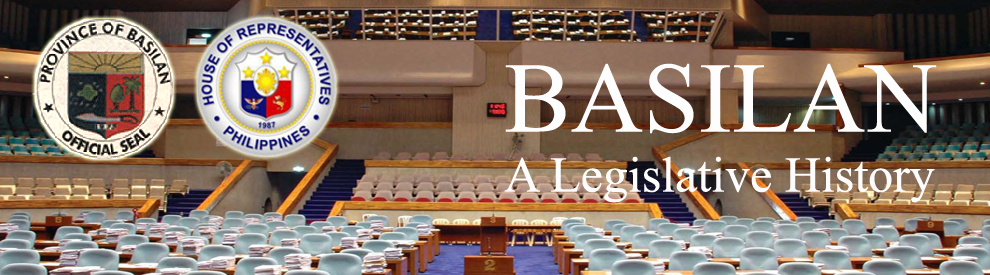
<style>
.page{position:relative;width:990px;height:275px}
.page>*{position:absolute;margin:0}
.t1{font:50px "TimesNewRomanPSMT";color:#fdfcfc}
.t2{font:100px "TimesNewRomanPSMT";color:#fdfdfd}
</style>
<div class="page">
<p class="t1" style="left:504px;top:63px;width:433px;height:140px;text-align:center"><span class="t2">BASILAN<br></span>A Legislative History</p>
</div>
